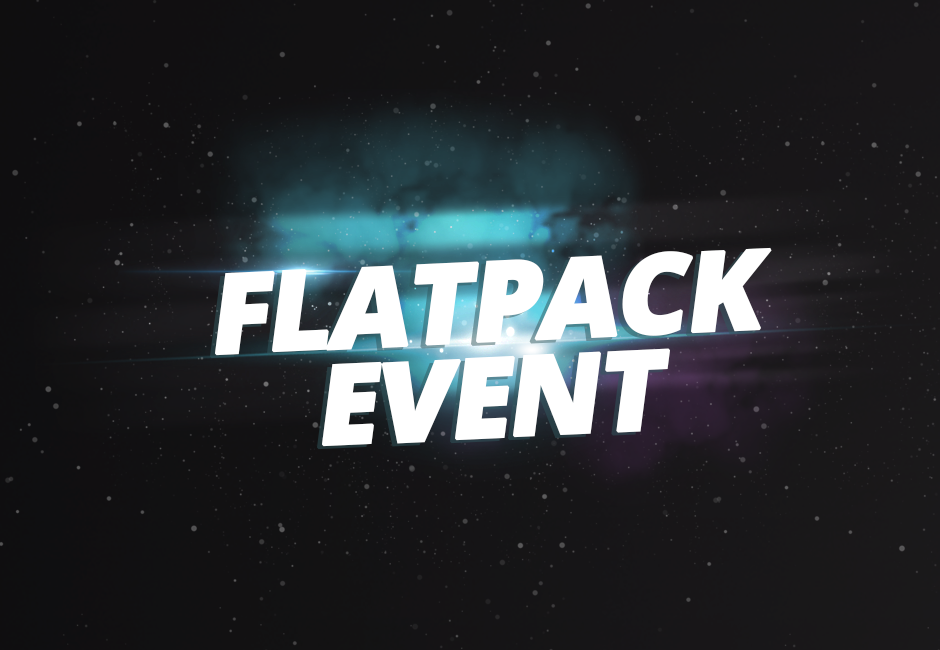
<style>
.page{position:relative;width:940px;height:650px}
.page>*{position:absolute;margin:0}
.t1{font:110px/96px "OpenSans-Extrabold";letter-spacing:-0.045em;color:#ffffff;font-weight:bold;font-style:italic}
</style>
<div class="page">
<p class="t1" style="left:215px;top:247px;width:557px;height:200px;text-align:center;rotate:-3deg">FLATPACK<br>EVENT</p>
</div>
